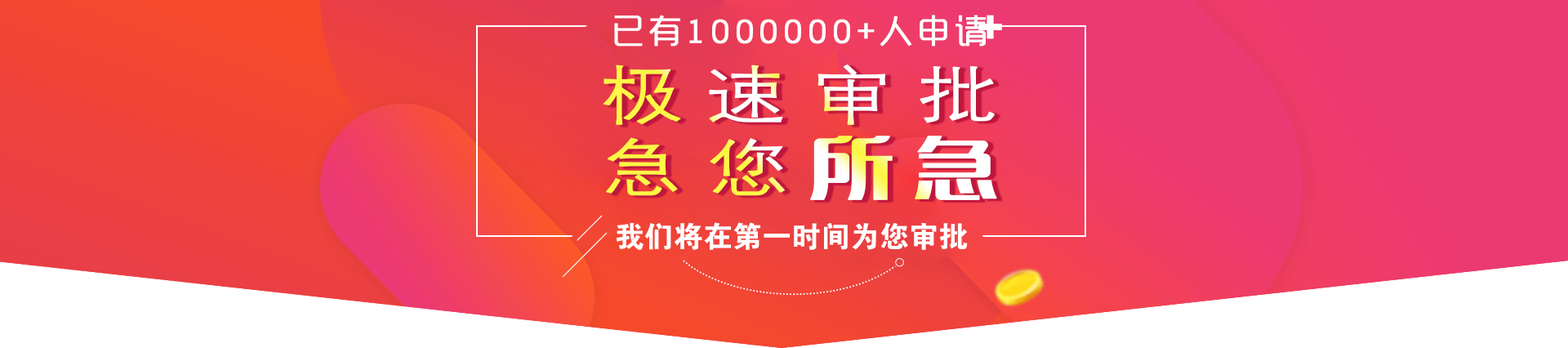
<style>
.page{position:relative;width:1568px;height:348px}
.page>*{position:absolute;margin:0}
.t1{font:33.3px "MFYueHei_Noncommercial-Regular";letter-spacing:0.1em;color:#ffffff;font-weight:bold}
.t2{font:66.7px/70.5px "FZXH1JW--GB1-0";letter-spacing:0.2em;font-weight:bold;scale:1.28 1}
.t3{font:66.7px/70.5px "MFLangQian_Noncommercial-Regular";letter-spacing:0.2em;font-weight:bold;scale:1.28 1}
.t4{font:29.4px "FZDHTJW--GB1-0";color:#ffffff}
</style>
<div class="page">
<p class="t1" style="left:614px;top:15px;width:373px;height:32px">已有1000000+人申请</p>
<p class="t2" style="left:603px;top:64px;width:394px;height:136px">极速审批<br>急您<span class="t3">所急</span></p>
<p class="t4" style="left:616px;top:222px;width:352px;height:28px">我们将在第一时间为您审批</p>
</div>
